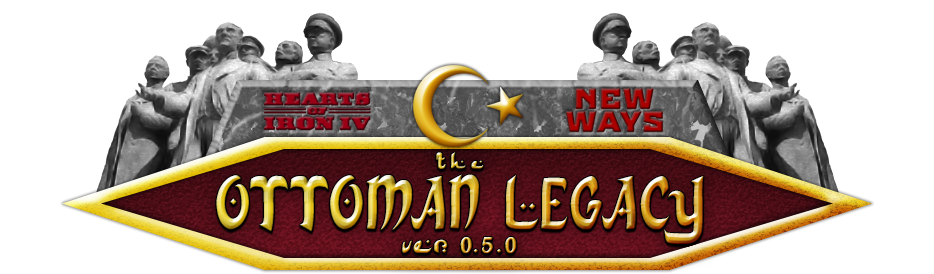
<style>
.page{position:relative;width:934px;height:274px;background:#ffffff}
.page>*{position:absolute;margin:0}
.t1{font:76px/60px "ArabDancesMediumItalic"}
.t2{font:23px/60px "ArabDancesMediumItalic";letter-spacing:0.2em;font-weight:bold}
.t3{font:36px/24px "ArabDancesMediumItalic";font-weight:bold}
</style>
<div class="page">
<p class="t1" style="left:216px;top:152px;width:488px;height:102px;text-align:center"><span class="t2">the<br></span>OTTOMAN LEGACY<br><span class="t3">ver. 0.5.0</span></p>
</div>
